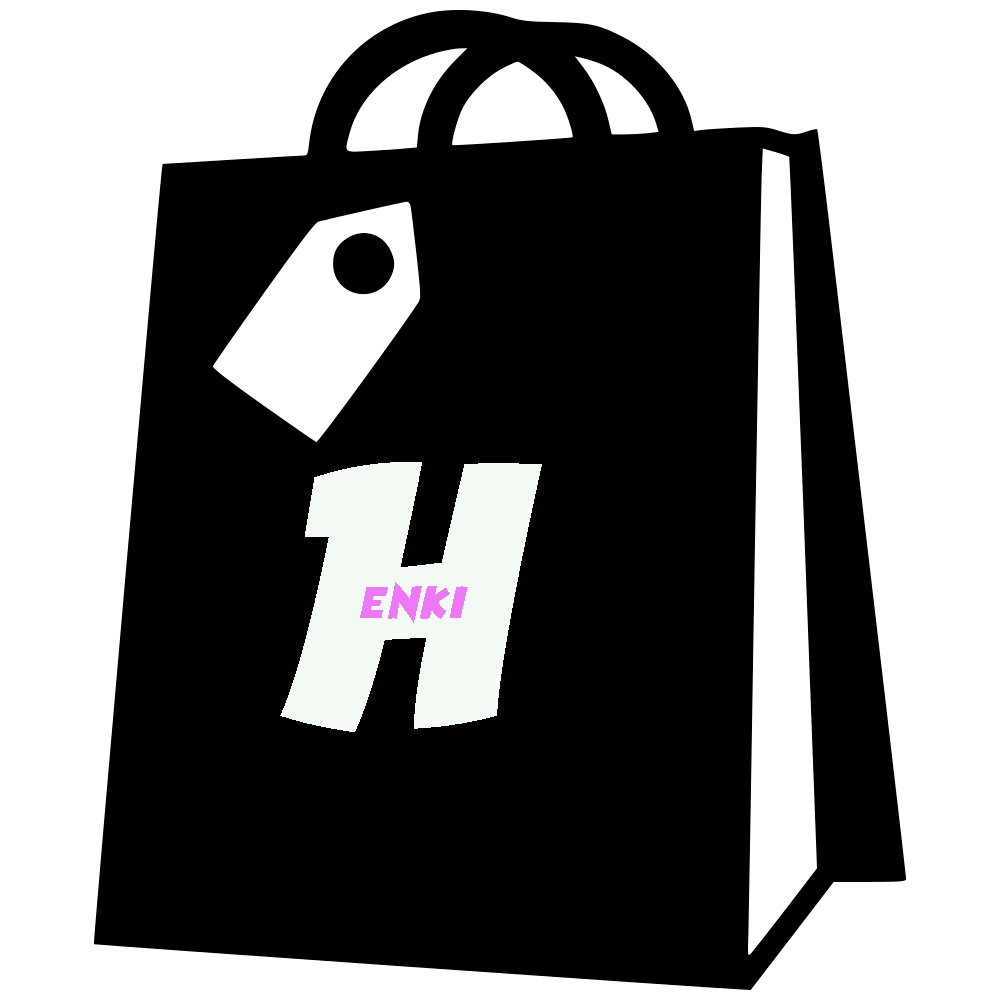
<style>
.page{position:relative;width:1000px;height:1000px;background:#000000}
.page>*{position:absolute;margin:0}
.t1{font:204.1px "HeroesLegend";letter-spacing:0.04em;color:#f4fbf4}
.t2{font:30.3px "HeroesLegend";letter-spacing:0.04em;color:#ed79f7}
</style>
<div class="page">
<p class="t1" style="left:280px;top:462px;width:262px;height:270px">H</p>
<p class="t2" style="left:360px;top:582px;width:108px;height:41px">enki</p>
</div>
